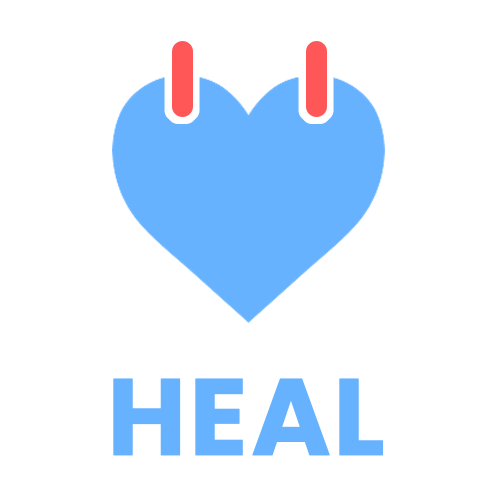
<style>
.page{position:relative;width:498px;height:498px;background:#ffffff}
.page>*{position:absolute;margin:0}
.t1{font:108.4px "Poppins-Bold";color:#66b2ff;font-weight:bold}
</style>
<div class="page">
<p class="t1" style="left:113px;top:378px;width:271px;height:78px">HEAL</p>
</div>
